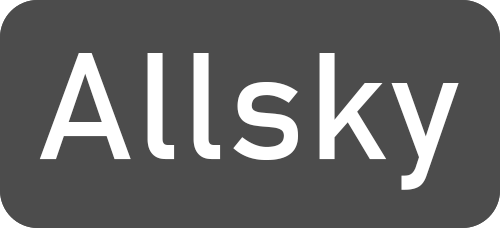
<style>
.page{position:relative;width:500px;height:228px;background:#4c4c4c}
.page>*{position:absolute;margin:0}
.t1{font:148.7px "Bahnschrift";letter-spacing:0.021em;color:#ffffff}
</style>
<div class="page">
<p class="t1" style="left:39px;top:53px;width:420px;height:137px">Allsky</p>
</div>
